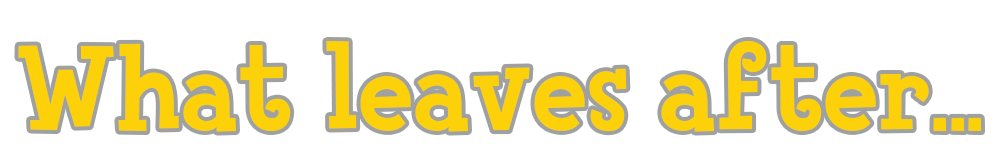
<style>
.page{position:relative;width:1000px;height:168px;background:#ffffff}
.page>*{position:absolute;margin:0}
.t1{font:123px "FinkHeavy";color:#fdd10a}
</style>
<div class="page">
<p class="t1" style="left:18px;top:41px;width:964px;height:91px">What leaves after...</p>
</div>
